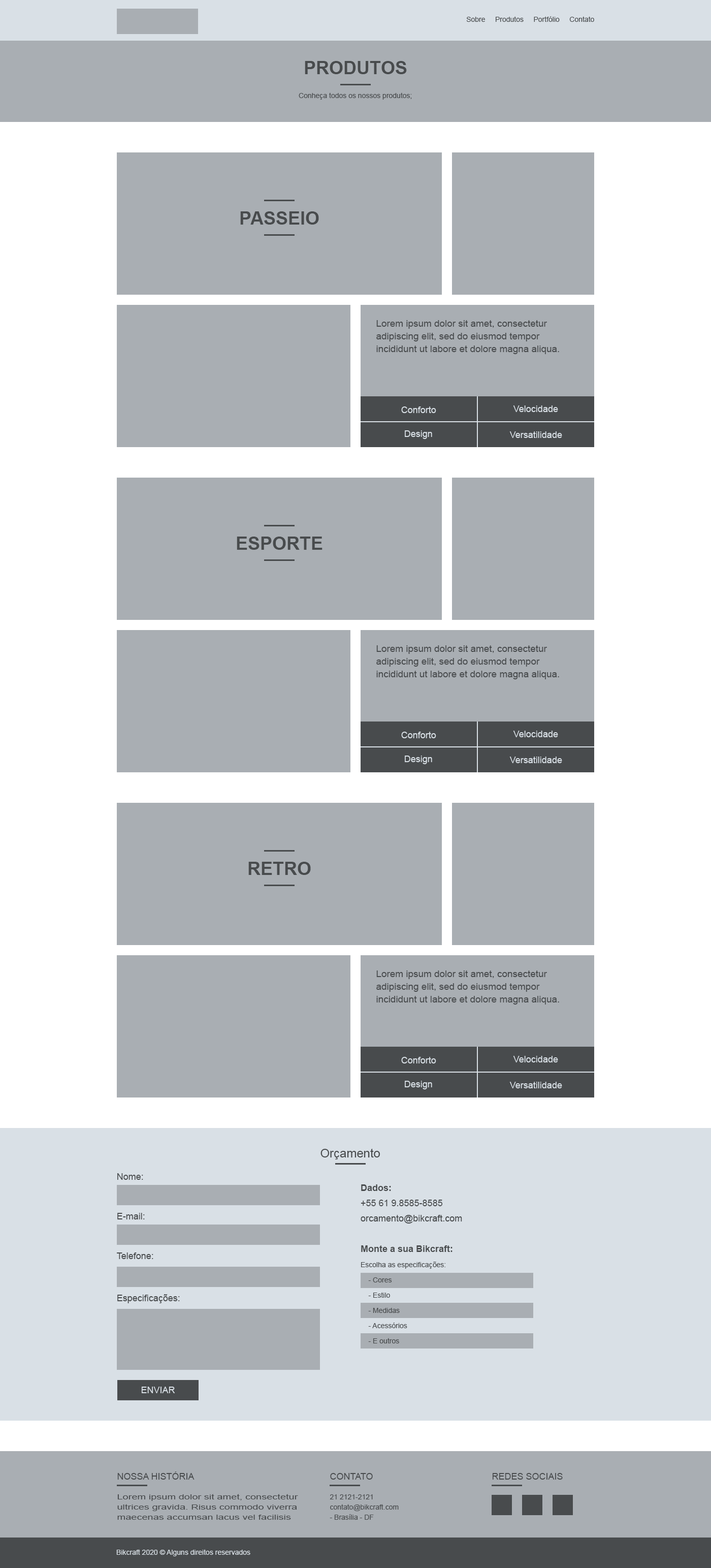
<style>
.page{position:relative;width:711px;height:1568px;background:#a9aeb3}
.page>*{position:absolute;margin:0}
.t1{font:7.1px "ArialMT";color:#484b4d}
.t2{font:18.3px "Arial-BoldMT";color:#484b4d;text-transform:uppercase}
.t3{font:9.1px/12.7px "ArialMT";color:#484b4d;scale:1.05 1}
.t4{font:9.1px "ArialMT";color:#d9e0e6}
.t5{font:12.2px "ArialMT";color:#484b4d}
.t6{font:9.1px "ArialMT";color:#484b4d}
.t7{font:7.1px/15.2px "ArialMT";color:#484b4d}
.t8{font:9.1px/15.2px "Arial-BoldMT";color:#484b4d}
.t9{font:9.1px/15.2px "ArialMT";color:#484b4d}
.t10{font:9.1px "ArialMT";color:#484b4d;text-transform:uppercase}
.t11{font:7.1px/10.2px "ArialMT";color:#484b4d;scale:1.43 1}
.t12{font:7.1px/10.2px "ArialMT";color:#484b4d}
.t13{font:7.1px "ArialMT";color:#d9e0e6}
</style>
<div class="page">
<p class="t1" style="left:466px;top:16px;width:128px;height:6px">Sobre     Produtos     Portfólio     Contato</p>
<p class="t2" style="left:305px;top:61px;width:102px;height:13px">Produtos</p>
<p class="t1" style="left:299px;top:92px;width:113px;height:8px">Conheça todos os nossos produtos;</p>
<p class="t2" style="left:240px;top:211px;width:79px;height:14px">PASSEIO</p>
<p class="t3" style="left:377px;top:320px;width:182px;height:34px">Lorem ipsum dolor sit amet, consectetur adipiscing elit, sed do eiusmod tempor incididunt ut labore et dolore magna aliqua.</p>
<p class="t4" style="left:401px;top:406px;width:35px;height:7px">Conforto</p>
<p class="t4" style="left:513px;top:405px;width:45px;height:7px">Velocidade</p>
<p class="t4" style="left:405px;top:430px;width:27px;height:9px">Design</p>
<p class="t4" style="left:510px;top:431px;width:52px;height:7px">Versatilidade</p>
<p class="t2" style="left:237px;top:537px;width:86px;height:13px">ESPORTE</p>
<p class="t3" style="left:377px;top:645px;width:182px;height:34px">Lorem ipsum dolor sit amet, consectetur adipiscing elit, sed do eiusmod tempor incididunt ut labore et dolore magna aliqua.</p>
<p class="t4" style="left:401px;top:732px;width:35px;height:6px">Conforto</p>
<p class="t4" style="left:513px;top:731px;width:45px;height:6px">Velocidade</p>
<p class="t4" style="left:405px;top:756px;width:27px;height:8px">Design</p>
<p class="t4" style="left:510px;top:757px;width:52px;height:6px">Versatilidade</p>
<p class="t2" style="left:248px;top:862px;width:63px;height:13px">RETRO</p>
<p class="t3" style="left:377px;top:970px;width:182px;height:35px">Lorem ipsum dolor sit amet, consectetur adipiscing elit, sed do eiusmod tempor incididunt ut labore et dolore magna aliqua.</p>
<p class="t4" style="left:401px;top:1057px;width:35px;height:6px">Conforto</p>
<p class="t4" style="left:513px;top:1056px;width:45px;height:6px">Velocidade</p>
<p class="t4" style="left:405px;top:1081px;width:27px;height:8px">Design</p>
<p class="t4" style="left:510px;top:1082px;width:52px;height:6px">Versatilidade</p>
<p class="t5" style="left:321px;top:1148px;width:60px;height:11px">Orçamento</p>
<p class="t6" style="left:117px;top:1173px;width:26px;height:7px">Nome:</p>
<p class="t7" style="left:361px;top:1184px;width:101px;height:159px"><span class="t8">Dados:</span><span class="t9"> <br>+55 61 9.8585-8585<br>orcamento@bikcraft.com<br><br></span><span class="t8">Monte a sua Bikcraft:<br></span>Escolha as especificações:<br>    - Cores<br>    - Estilo<br>    - Medidas<br>    - Acessórios<br>    - E outros</p>
<p class="t6" style="left:117px;top:1213px;width:28px;height:6px">E-mail:</p>
<p class="t6" style="left:117px;top:1252px;width:36px;height:7px">Telefone:</p>
<p class="t6" style="left:117px;top:1294px;width:63px;height:9px">Especificações:</p>
<p class="t4" style="left:141px;top:1387px;width:34px;height:6px">ENVIAR</p>
<p class="t10" style="left:117px;top:1471px;width:78px;height:9px">Nossa História</p>
<p class="t10" style="left:330px;top:1473px;width:43px;height:7px">contato</p>
<p class="t10" style="left:492px;top:1473px;width:71px;height:7px">redes sociais</p>
<p class="t11" style="left:117px;top:1494px;width:181px;height:26px">Lorem ipsum dolor sit amet, consectetur ultrices gravida. Risus commodo viverra maecenas accumsan lacus vel facilisis</p>
<p class="t12" style="left:330px;top:1494px;width:69px;height:26px">21 2121-2121<br>contato@bikcraft.com<br>- Brasília - DF</p>
<p class="t13" style="left:116px;top:1549px;width:134px;height:7px">Bikcraft 2020 © Alguns direitos reservados</p>
</div>
